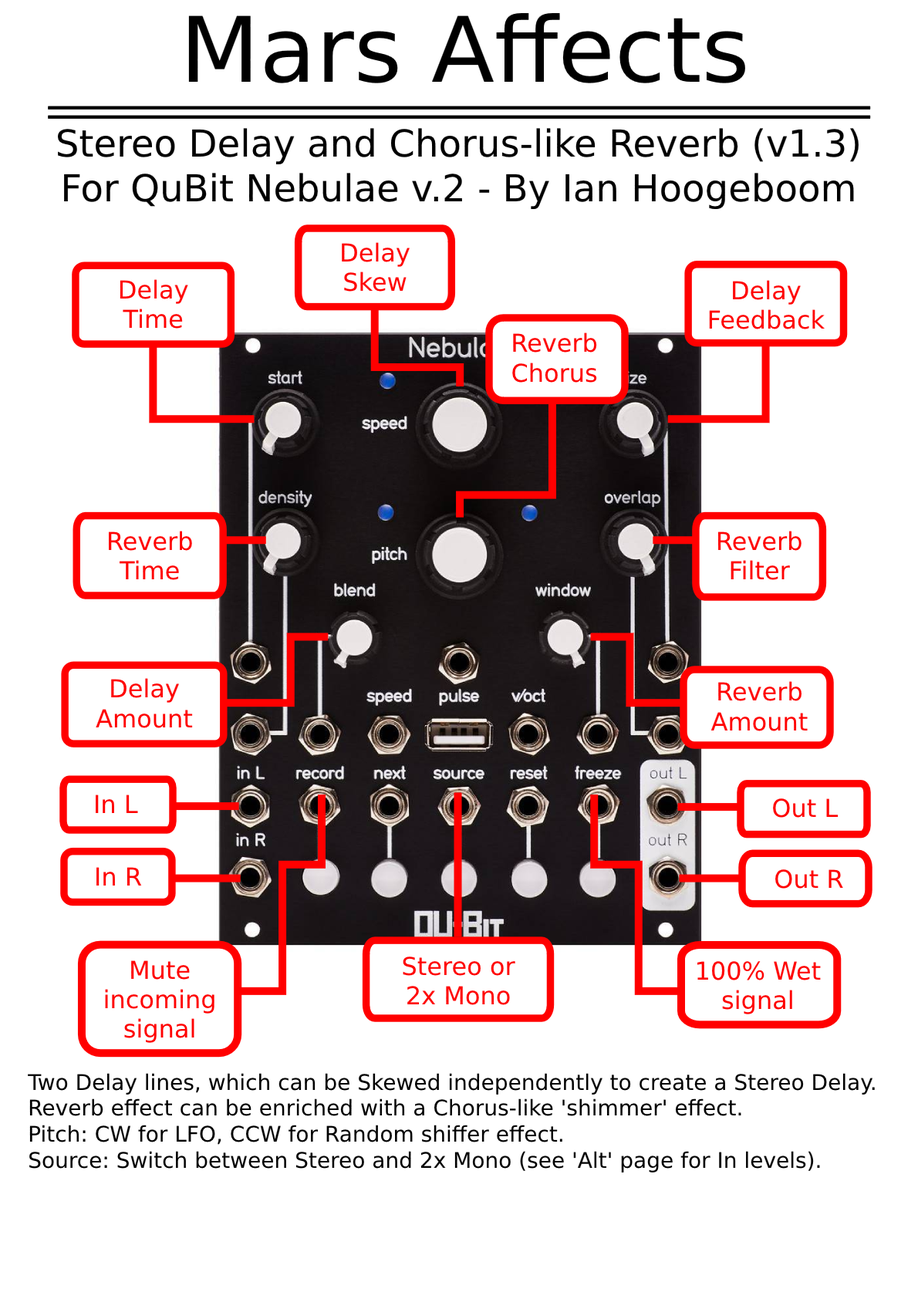
<style>
.page{position:relative;width:918px;height:1299px;background:#ffffff}
.page>*{position:absolute;margin:0}
.t1{font:90.3px "Helvetica";color:#000000}
.t2{font:37.2px "Helvetica";color:#000000}
.t3{font:37.2px "Helvetica";letter-spacing:-0.003em;color:#000000}
.t4{font:24.7px "Helvetica";color:#ff0000}
.t5{font:21.6px "Helvetica";color:#000000}
</style>
<div class="page">
<p class="t1" style="left:188px;top:13px;width:557px;height:70px">Mars Affects</p>
<p class="t2" style="left:57px;top:128px;width:802px;height:82px;text-align:center">Stereo Delay and Chorus-like Reverb (v1.3)<br>For Q<span class="t3">u</span>Bit N<span class="t3">e</span>bulae v.2 - By Ian Hoogeboom</p>
<p class="t4" style="left:342px;top:242px;width:68px;height:50px;text-align:center">Delay<br>Skew</p>
<p class="t4" style="left:120px;top:279px;width:68px;height:50px;text-align:center">Delay<br>Time</p>
<p class="t4" style="left:709px;top:280px;width:116px;height:49px;text-align:center">Delay<br>Feedback</p>
<p class="t4" style="left:512px;top:332px;width:85px;height:51px;text-align:center">Reverb<br>Chorus</p>
<p class="t4" style="left:109px;top:531px;width:83px;height:49px;text-align:center">Reverb<br>Time</p>
<p class="t4" style="left:718px;top:531px;width:83px;height:49px;text-align:center">Reverb<br>Filter</p>
<p class="t4" style="left:96px;top:678px;width:97px;height:50px;text-align:center">Delay<br>Amount</p>
<p class="t4" style="left:710px;top:681px;width:98px;height:50px;text-align:center">Reverb<br>Amount</p>
<p class="t4" style="left:96px;top:795px;width:42px;height:18px">In L</p>
<p class="t4" style="left:773px;top:798px;width:65px;height:20px">Out L</p>
<p class="t4" style="left:96px;top:867px;width:46px;height:19px">In R</p>
<p class="t4" style="left:774px;top:869px;width:69px;height:20px">Out R</p>
<p class="t4" style="left:105px;top:960px;width:109px;height:83px;text-align:center">Mute<br>incoming<br>signal</p>
<p class="t4" style="left:403px;top:957px;width:112px;height:48px;text-align:center">Stereo or<br>2x Mono</p>
<p class="t4" style="left:697px;top:961px;width:124px;height:53px;text-align:center">100% Wet<br>signal</p>
<p class="t5" style="left:28px;top:1073px;width:847px;height:100px">Two Delay lines, which can be Skewed independently to create a Stereo Delay.<br>Reverb effect can be enriched with a Chorus-like 'shimmer' effect.<br>Pitch: CW for LFO, CCW for Random shiffer effect.<br>Source: Switch between Stereo and 2x Mono (see 'Alt' page for In levels).</p>
</div>
